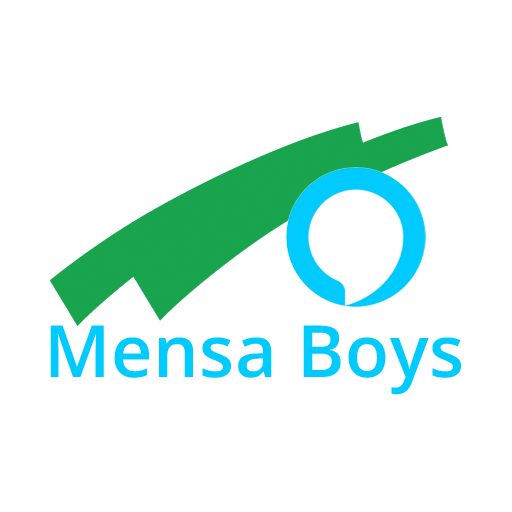
<style>
.page{position:relative;width:512px;height:512px;background:#ffffff}
.page>*{position:absolute;margin:0}
.t1{font:72px "OpenSans-Semibold";letter-spacing:0.01em;color:#01caff}
</style>
<div class="page">
<p class="t1" style="left:50px;top:325px;width:411px;height:70px">Mensa Boys</p>
</div>
